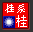
<style>
.page{position:relative;width:33px;height:32px;background:#f20000}
.page>*{position:absolute;margin:0}
.t1{font:10.4px "SimSun";color:#ffffff}
.t2{font:11.7px "SimSun";color:#ffffff}
</style>
<div class="page">
<p class="t1" style="left:5px;top:4px;width:20px;height:9px">桂系</p>
<p class="t2" style="left:16px;top:15px;width:11px;height:12px">桂</p>
</div>
